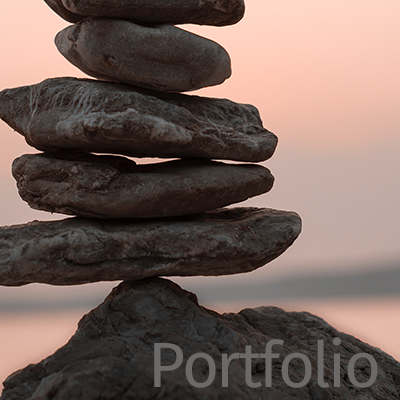
<style>
.page{position:relative;width:400px;height:400px}
.page>*{position:absolute;margin:0}
.t1{font:63.7px "FiraSans-Regular";letter-spacing:-0.04em;color:#6c6969}
</style>
<div class="page">
<p class="t1" style="left:154px;top:337px;width:224px;height:51px">Portfolio</p>
</div>
